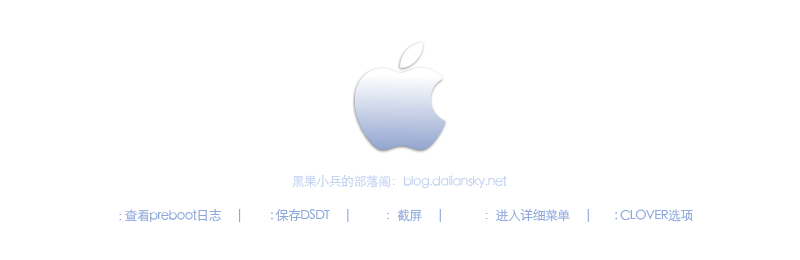
<style>
.page{position:relative;width:800px;height:260px;background:#ffffff}
.page>*{position:absolute;margin:0}
.t1{font:13px "STHeitiSC-Light";letter-spacing:-0.05em;color:#c3d2f0}
.t2{font:13px "STHeitiSC-Light";letter-spacing:-0.05em;color:#8ea8dc}
.t3{font:13px "Avenir-Book";letter-spacing:-0.05em;color:#ffffff}
.t4{font:13px "Avenir-Book";letter-spacing:-0.05em;color:#8ea8dc}
.t5{font:13px "STHeitiSC-Light";letter-spacing:-0.05em;color:#ffffff}
</style>
<div class="page">
<p class="t1" style="left:292px;top:175px;width:215px;height:13px">黑果小兵的部落阁：blog.daliansky.net</p>
<p class="t2" style="left:106px;top:209px;width:587px;height:13px"><span class="t3">F2</span><span class="t4">: </span>查看preboot日志      |      <span class="t5">F4</span>: 保存DSDT      |      <span class="t5">F10</span>：截屏      |      <span class="t5">空格</span>：进入详细菜单      |      <span class="t5">o</span>: CLOVER选项</p>
</div>
